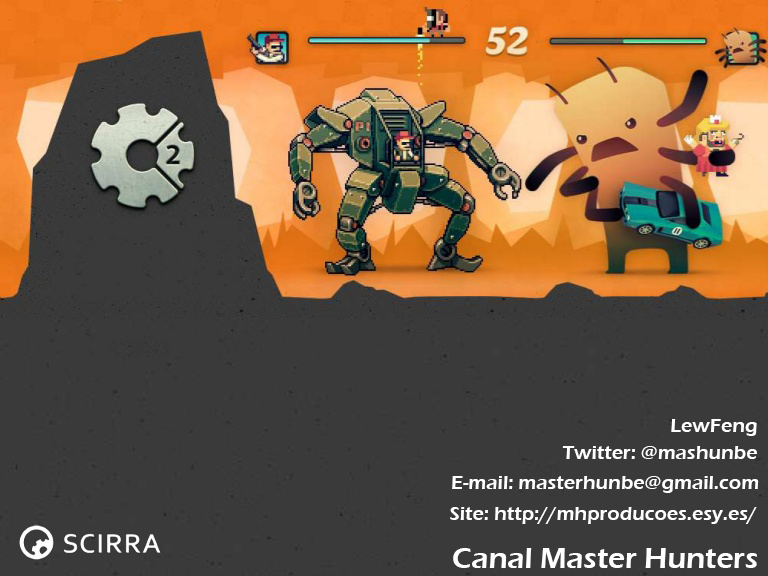
<style>
.page{position:relative;width:768px;height:576px;background:#3a3a3a}
.page>*{position:absolute;margin:0}
.t1{font:20px "ErasITC-Demi";color:#ffffff}
.t2{font:30px "ErasITC-Demi";color:#ffffff}
</style>
<div class="page">
<p class="t1" style="left:671px;top:419px;width:86px;height:17px">LewFeng</p>
<p class="t1" style="left:562px;top:446px;width:195px;height:13px">Twitter: @mashunbe</p>
<p class="t1" style="left:452px;top:476px;width:307px;height:17px">E-mail: masterhunbe@gmail.com</p>
<p class="t1" style="left:450px;top:507px;width:307px;height:17px">Site: http://mhproducoes.esy.es/</p>
<p class="t2" style="left:453px;top:548px;width:304px;height:20px">Canal Master Hunters</p>
</div>
